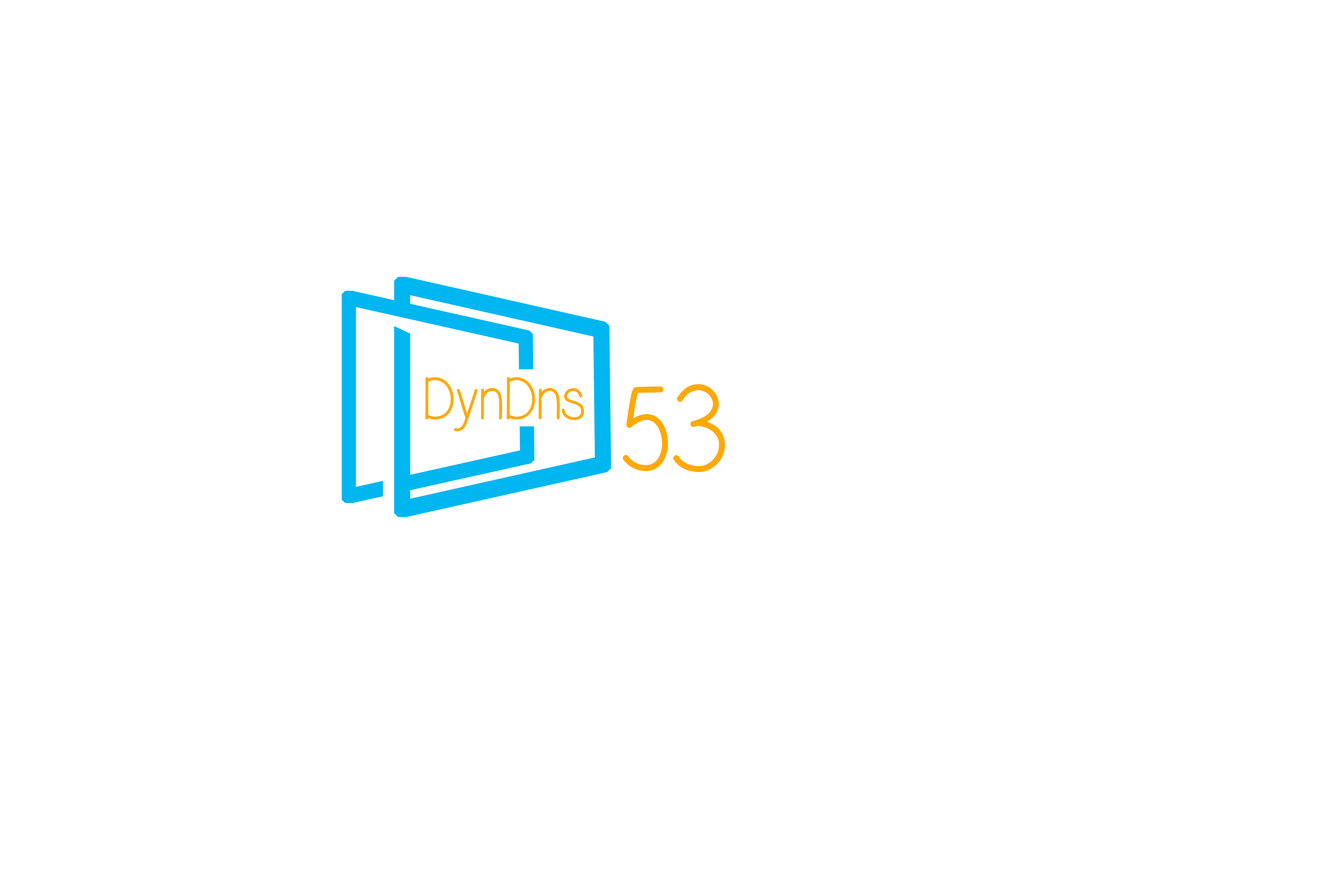
<style>
.page{position:relative;width:1337px;height:892px;background:#ffffff}
.page>*{position:absolute;margin:0}
.t1{font:59.4px "Alexis-Marie";color:#ffa904}
.t2{font:123.8px "Alexis-Marie";color:#ffa904}
</style>
<div class="page">
<p class="t1" style="left:425px;top:377px;width:159px;height:54px">DynDns</p>
<p class="t2" style="left:623px;top:384px;width:102px;height:88px">53</p>
</div>
